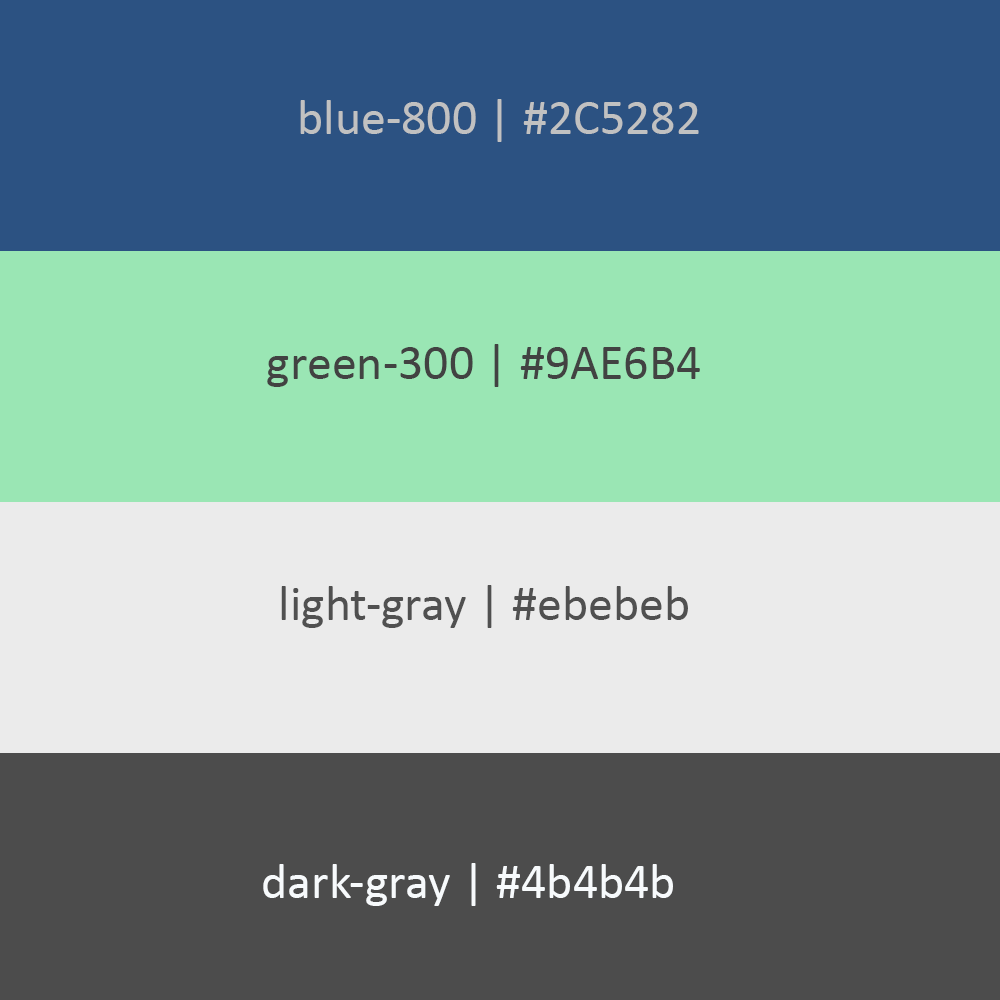
<style>
.page{position:relative;width:1000px;height:1000px;background:#4c4c4c}
.page>*{position:absolute;margin:0}
.t1{font:12px "Calibri";color:#c1c1c1}
.t2{font:12px "Calibri";color:#424242}
.t3{font:12px "Calibri";color:#505050}
.t4{font:12px "Calibri";color:#f7fafc}
</style>
<div class="page">
<p class="t1" style="left:300px;top:99px;width:399px;height:43px;text-align:center">blue-800 | #2C5282</p>
<p class="t2" style="left:267px;top:344px;width:433px;height:43px;text-align:center">green-300 | #9AE6B4</p>
<p class="t3" style="left:281px;top:585px;width:407px;height:43px;text-align:center">light-gray | #ebebeb</p>
<p class="t4" style="left:263px;top:863px;width:410px;height:43px;text-align:center">dark-gray | #4b4b4b</p>
</div>
